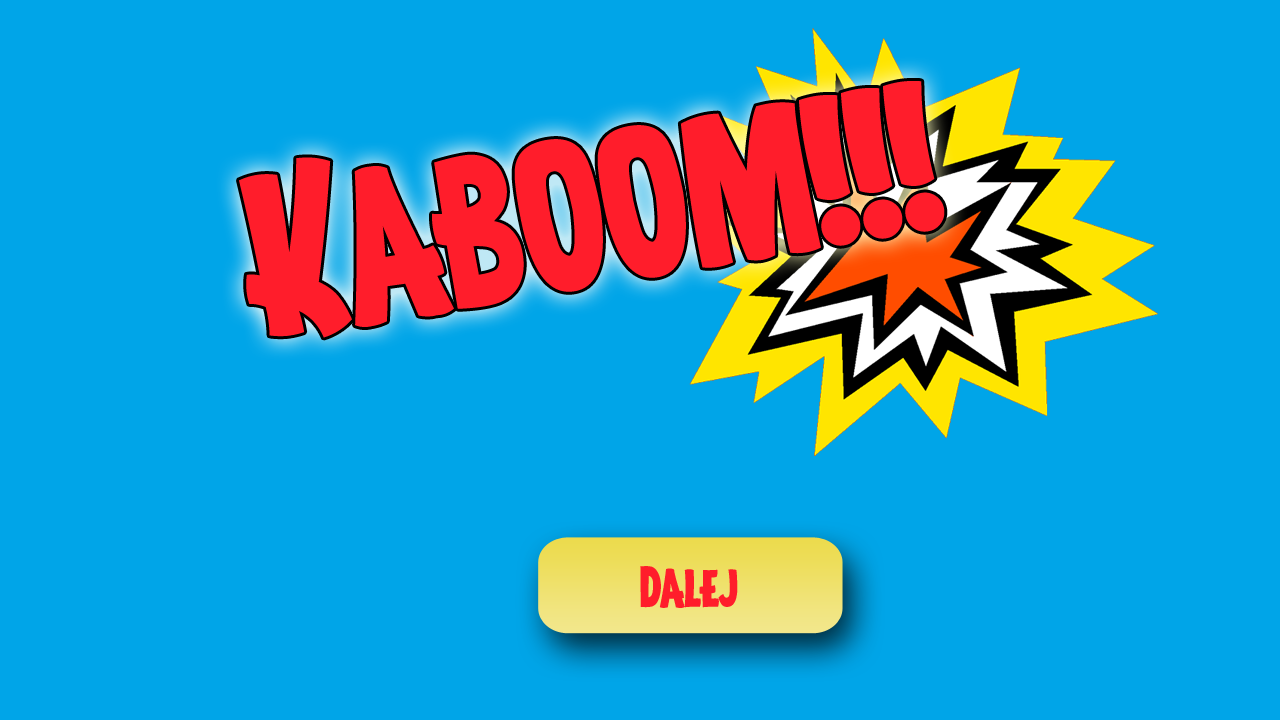
<style>
.page{position:relative;width:1280px;height:720px;background:#00a5e8}
.page>*{position:absolute;margin:0}
.t1{font:200px "Tygodnik";color:#ff1d2b}
.t2{font:50px "Tygodnik";color:#ff1d2b}
</style>
<div class="page">
<p class="t1" style="left:239px;top:81px;width:706px;height:257px;rotate:-9deg">Kaboom!!!</p>
<p class="t2" style="left:640px;top:566px;width:98px;height:42px">Dalej</p>
</div>
